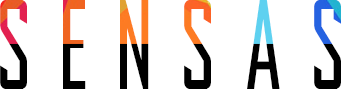
<style>
.page{position:relative;width:341px;height:89px;background:#ffffff}
.page>*{position:absolute;margin:0}
.t1{font:110.7px "NFLChargers2007";letter-spacing:0.32em;scale:0.81 1}
</style>
<div class="page">
<p class="t1" style="left:0px;top:0px;width:341px;height:89px">SENSAS</p>
</div>
